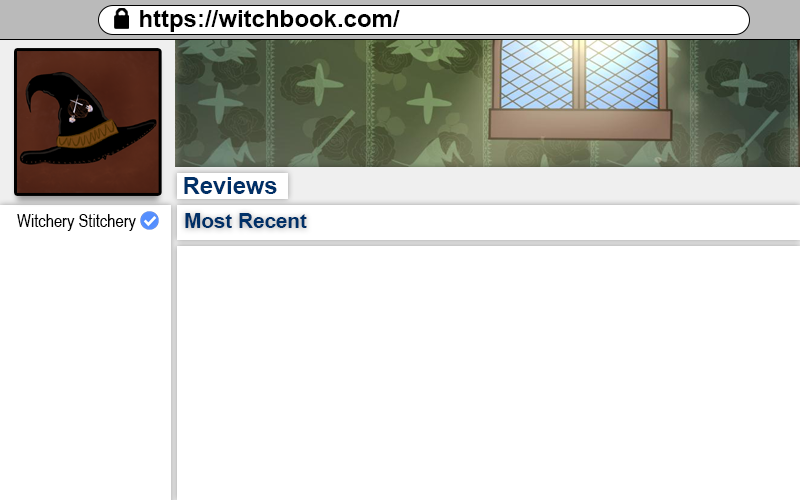
<style>
.page{position:relative;width:800px;height:500px;background:#ffffff}
.page>*{position:absolute;margin:0}
.t1{font:24px "Arial-BoldMT";color:#000000}
.t2{font:23.7px "Arial-BoldMT";color:#003067}
.t3{font:18px "ArialNarrow";color:#000000}
.t4{font:20.7px "Arial-BoldMT";color:#003067}
</style>
<div class="page">
<p class="t1" style="left:140px;top:10px;width:260px;height:22px">https://witchbook.com/</p>
<p class="t2" style="left:184px;top:177px;width:93px;height:17px">Reviews</p>
<p class="t3" style="left:17px;top:214px;width:119px;height:17px">Witchery Stitchery</p>
<p class="t4" style="left:185px;top:213px;width:122px;height:15px">Most Recent</p>
</div>
